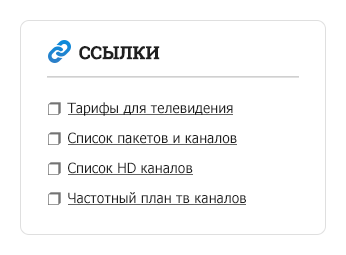
<style>
.page{position:relative;width:346px;height:255px;background:#ffffff}
.page>*{position:absolute;margin:0}
.t1{font:18px "RobotoSlab-Bold";color:#1f1f1f;text-transform:uppercase}
.t2{font:18px "ArialUnicodeMS";color:#737373}
.t3{font:14px "Tahoma";color:#1f1f1f}
</style>
<div class="page">
<p class="t1" style="left:79px;top:46px;width:81px;height:14px">ссылки</p>
<p class="t2" style="left:48px;top:102px;width:13px;height:13px">❒</p>
<p class="t3" style="left:67px;top:102px;width:166px;height:14px">Тарифы для телевидения</p>
<p class="t2" style="left:48px;top:132px;width:13px;height:13px">❒</p>
<p class="t3" style="left:68px;top:132px;width:169px;height:12px">Список пакетов и каналов</p>
<p class="t2" style="left:48px;top:162px;width:13px;height:13px">❒</p>
<p class="t3" style="left:68px;top:162px;width:125px;height:12px">Список HD каналов</p>
<p class="t2" style="left:48px;top:192px;width:13px;height:13px">❒</p>
<p class="t3" style="left:68px;top:192px;width:178px;height:12px">Частотный план тв каналов</p>
</div>
